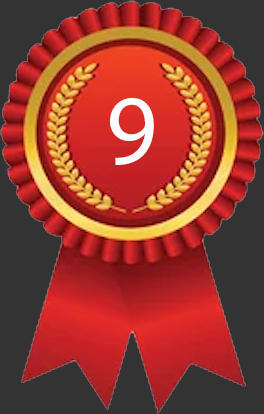
<style>
.page{position:relative;width:264px;height:414px;background:#333333}
.page>*{position:absolute;margin:0}
.t1{font:100px "MyriadPro-Regular";color:#fefdfd}
</style>
<div class="page">
<p class="t1" style="left:110px;top:98px;width:44px;height:67px">9</p>
</div>
